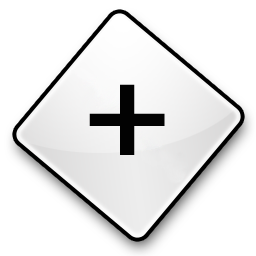
<style>
.page{position:relative;width:256px;height:256px;background:#ffffff}
.page>*{position:absolute;margin:0}
.t1{font:132px "MyriadPro-Bold";letter-spacing:0.005em;color:#020202;scale:1.1 1}
</style>
<div class="page">
<p class="t1" style="left:89px;top:84px;width:76px;height:71px">+</p>
</div>
